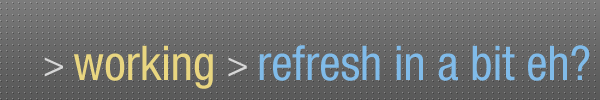
<style>
.page{position:relative;width:600px;height:100px}
.page>*{position:absolute;margin:0}
.t1{font:48px "HelveticaNeueLTCom-Cn";color:#80bbe9}
.t2{font:36px "HelveticaNeueLTCom-Cn";color:#d7d7d7}
.t3{font:48px "HelveticaNeueLTCom-Cn";color:#e9d680}
</style>
<div class="page">
<p class="t1" style="left:44px;top:45px;width:546px;height:44px"><span class="t2">&gt; </span><span class="t3">working </span><span class="t2">&gt; </span>refresh in a bit eh?</p>
</div>
